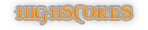
<style>
.page{position:relative;width:148px;height:30px}
.page>*{position:absolute;margin:0}
.t1{font:23px "VanHelsing-Regular";color:#ff8a00;text-transform:uppercase}
</style>
<div class="page">
<p class="t1" style="left:15px;top:6px;width:117px;height:18px">highscores</p>
</div>
